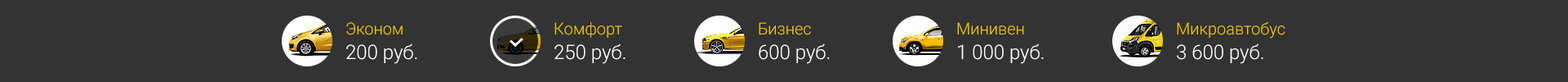
<style>
.page{position:relative;width:1568px;height:82px;background:#333333}
.page>*{position:absolute;margin:0}
.t1{font:19.6px/24.5px "Roboto-Light";color:#ffffff}
.t2{font:16.3px/24.5px "Roboto-Light";color:#f5ca00}
</style>
<div class="page">
<p class="t1" style="left:346px;top:22px;width:71px;height:42px"><span class="t2">Эконом<br></span>200 руб.</p>
<p class="t1" style="left:555px;top:22px;width:71px;height:42px"><span class="t2">Комфорт<br></span>250 руб.</p>
<p class="t1" style="left:759px;top:22px;width:71px;height:42px"><span class="t2">Бизнес<br></span>600 руб.</p>
<p class="t1" style="left:957px;top:22px;width:87px;height:42px"><span class="t2">Минивен<br></span>1 000 руб.</p>
<p class="t2" style="left:1177px;top:21px;width:108px;height:43px">Микроавтобус<br><span class="t1">3 600 руб.</span></p>
</div>
